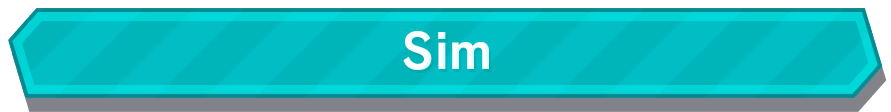
<style>
.page{position:relative;width:891px;height:112px;background:#00bec4}
.page>*{position:absolute;margin:0}
.t1{font:48px "RodinPro-B";color:#fffeff}
</style>
<div class="page">
<p class="t1" style="left:403px;top:31px;width:86px;height:39px">Sim</p>
</div>
